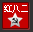
<style>
.page{position:relative;width:33px;height:32px;background:#c50000}
.page>*{position:absolute;margin:0}
.t1{font:10.4px "SimSun";letter-spacing:-0.25em;color:#ffffff}
</style>
<div class="page">
<p class="t1" style="left:4px;top:5px;width:24px;height:8px">红八二</p>
</div>
